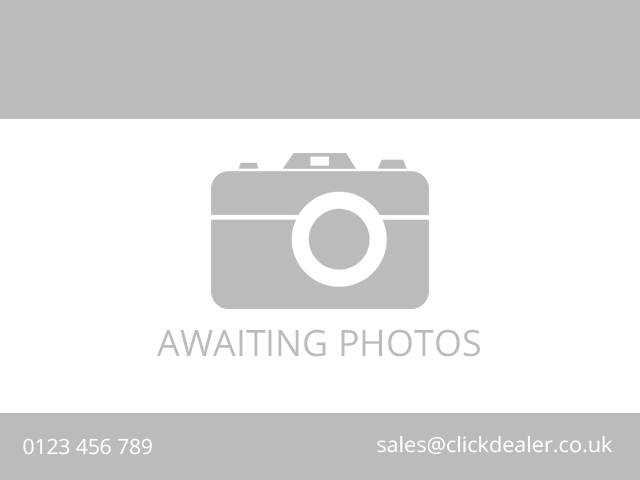
<style>
.page{position:relative;width:640px;height:480px;background:#ffffff}
.page>*{position:absolute;margin:0}
.t1{font:36.4px "OpenSans";color:#bbbbbb;text-transform:uppercase}
.t2{font:20.9px "OpenSans";letter-spacing:-0.01em;color:#ffffff}
.t3{font:21.1px "OpenSans";color:#ffffff}
</style>
<div class="page">
<p class="t1" style="left:157px;top:329px;width:323px;height:28px">AWAITING photos</p>
<p class="t2" style="left:23px;top:438px;width:129px;height:17px">0123 456 789</p>
<p class="t3" style="left:377px;top:435px;width:235px;height:20px">sales@clickdealer.co.uk</p>
</div>
